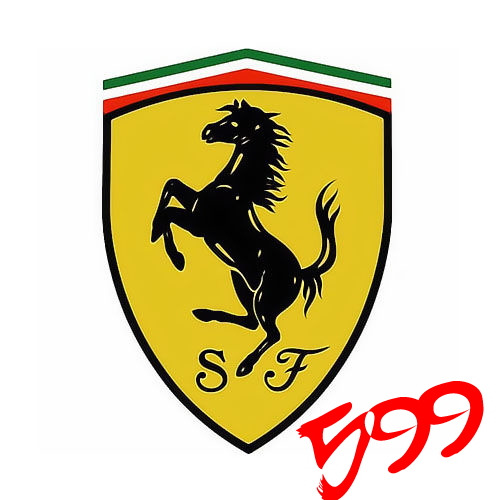
<style>
.page{position:relative;width:500px;height:500px;background:#ffffff}
.page>*{position:absolute;margin:0}
.t1{font:150px "MagikMarker";color:#ff0000}
</style>
<div class="page">
<p class="t1" style="left:296px;top:381px;width:188px;height:121px;rotate:-17deg">599</p>
</div>
